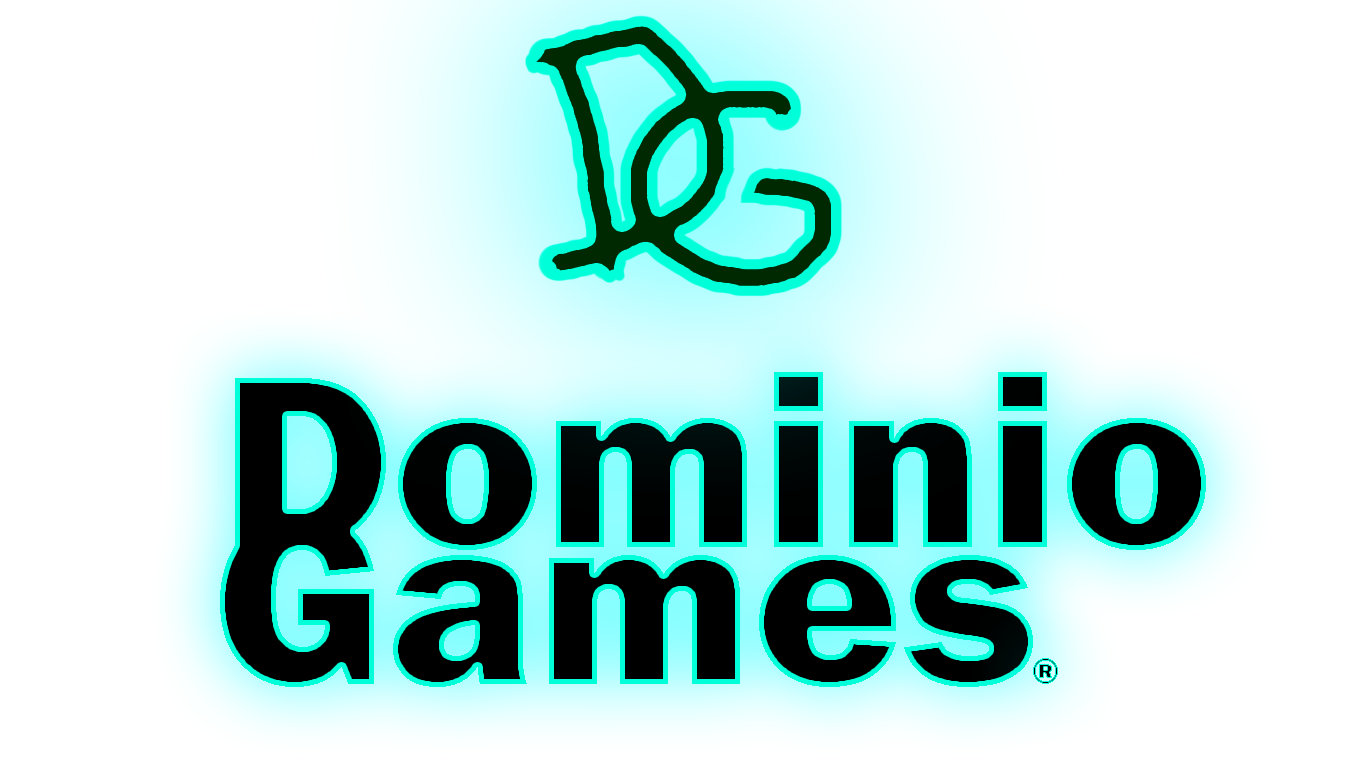
<style>
.page{position:relative;width:1366px;height:768px;background:#ffffff}
.page>*{position:absolute;margin:0}
.t1{font:254px "FranklinGothic-Heavy";color:#000000}
.t2{font:38.1px "FranklinGothic-Heavy"}
</style>
<div class="page">
<p class="t1" style="left:235px;top:372px;width:971px;height:178px">Dominio</p>
<p class="t1" style="left:220px;top:512px;width:813px;height:175px">Games</p>
<p class="t2" style="left:1033px;top:658px;width:25px;height:26px">®</p>
</div>
